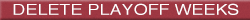
<style>
.page{position:relative;width:250px;height:20px}
.page>*{position:absolute;margin:0}
.t1{font:15px "Helvetica";color:#ffffff;scale:1.2 1}
</style>
<div class="page">
<p class="t1" style="left:13px;top:3px;width:226px;height:12px">DELETE PLAYOFF WEEKS</p>
</div>
